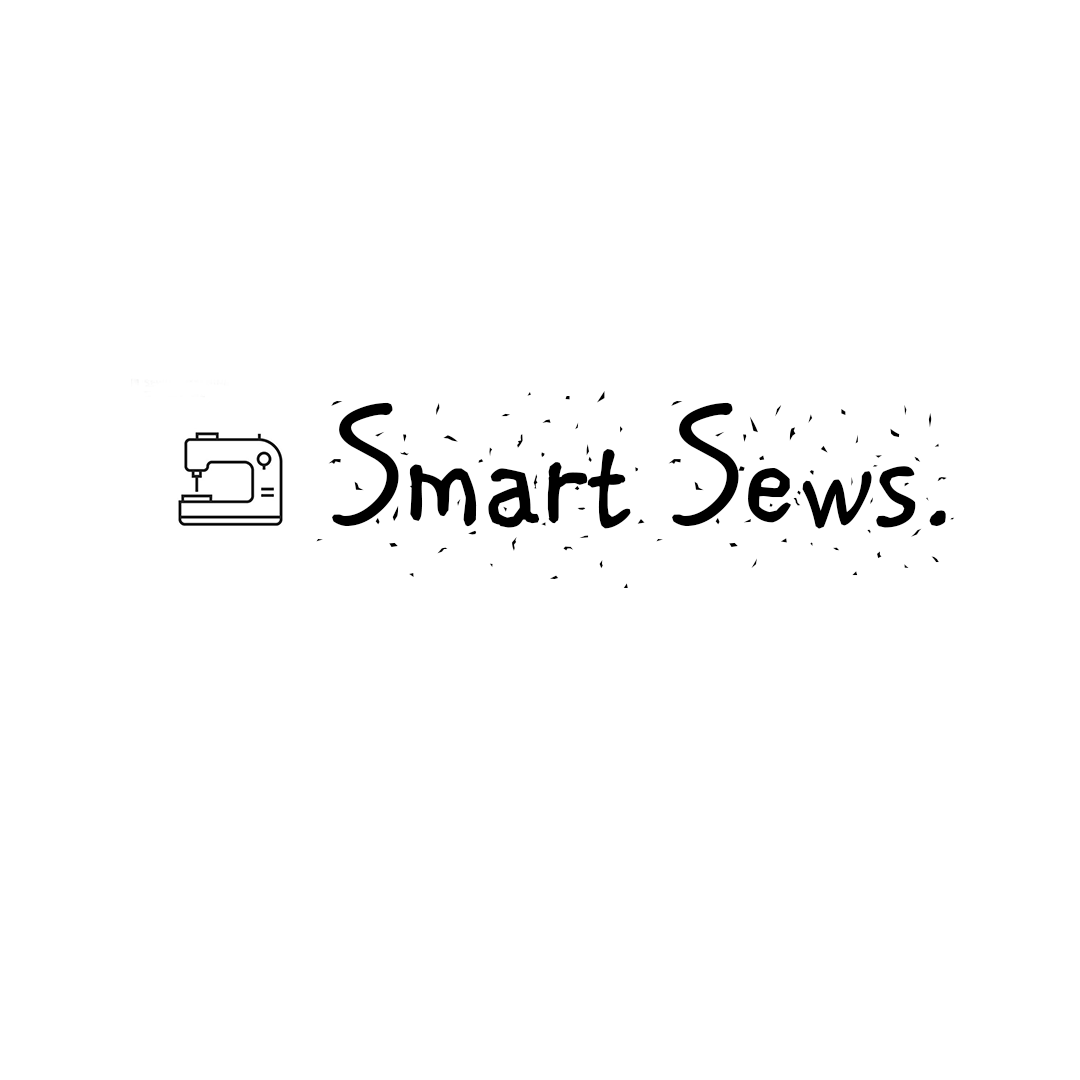
<style>
.page{position:relative;width:1080px;height:1080px;background:#ffffff}
.page>*{position:absolute;margin:0}
.t1{font:167.8px "ARCARTER";color:#000000}
</style>
<div class="page">
<p class="t1" style="left:316px;top:391px;width:639px;height:197px">Smart Sews.</p>
</div>
